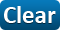
<style>
.page{position:relative;width:60px;height:30px}
.page>*{position:absolute;margin:0}
.t1{font:24.8px "Calibri-Bold";color:#ffffff}
</style>
<div class="page">
<p class="t1" style="left:4px;top:6px;width:52px;height:17px">Clear</p>
</div>
